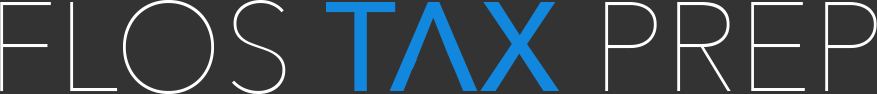
<style>
.page{position:relative;width:877px;height:94px;background:#333333}
.page>*{position:absolute;margin:0}
.t1{font:125px "AvenirNext-UltraLight";color:#ffffff}
.t2{font:125px "AvenirNext-Medium";color:#1187de}
</style>
<div class="page">
<p class="t1" style="left:0px;top:0px;width:877px;height:94px">FLOS <span class="t2">TAX </span>PREP</p>
</div>
